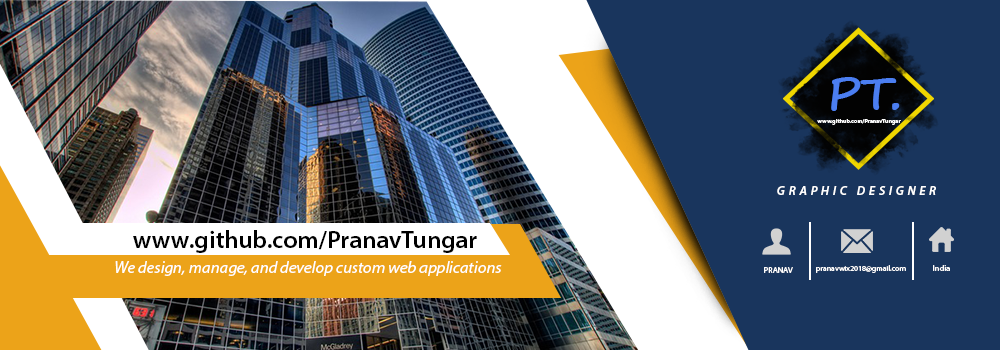
<style>
.page{position:relative;width:1000px;height:350px;background:#19355d}
.page>*{position:absolute;margin:0}
.t1{font:44.5px "SegoePrint-Bold";color:#4b7ef1;scale:1.07 1}
.t2{font:5.6px "MyriadPro-Semibold";color:#fefefe;scale:1.07 1}
.t3{font:12.5px "MyriadPro-SemiboldIt";letter-spacing:0.3em;color:#ffffff}
.t4{font:25px "MyriadPro-Semibold";color:#000000}
.t5{font:16.7px "MyriadPro-It";color:#ffffff}
.t6{font:8.3px "MyriadPro-Regular";color:#ffffff}
.t7{font:7.4px "MyriadPro-Regular";color:#ffffff;scale:1.07 1}
</style>
<div class="page">
<p class="t1" style="left:831px;top:77px;width:69px;height:34px">PT.</p>
<p class="t2" style="left:817px;top:119px;width:84px;height:6px">www.github.com/PranavTungar</p>
<p class="t3" style="left:777px;top:186px;width:159px;height:9px">GRAPHIC DESIGNER</p>
<p class="t4" style="left:133px;top:230px;width:344px;height:23px">www.github.com/PranavTungar</p>
<p class="t5" style="left:115px;top:261px;width:387px;height:15px">We design, manage, and develop custom web applications that suit you.</p>
<p class="t6" style="left:764px;top:267px;width:29px;height:6px">PRANAV</p>
<p class="t7" style="left:816px;top:265px;width:90px;height:8px">pranavwix2018@gmail.com</p>
<p class="t6" style="left:933px;top:265px;width:17px;height:6px">India</p>
</div>
